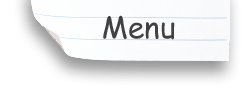
<style>
.page{position:relative;width:250px;height:100px;background:#ffffff}
.page>*{position:absolute;margin:0}
.t1{font:29.9px "ComicSansMS";color:#414142}
</style>
<div class="page">
<p class="t1" style="left:103px;top:15px;width:72px;height:25px">Menu</p>
</div>
